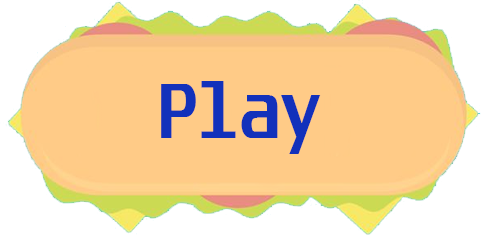
<style>
.page{position:relative;width:481px;height:235px;background:#ffcb87}
.page>*{position:absolute;margin:0}
.t1{font:66.7px "Unispace-Bold";color:#1231bb}
</style>
<div class="page">
<p class="t1" style="left:161px;top:81px;width:160px;height:73px">Play</p>
</div>
